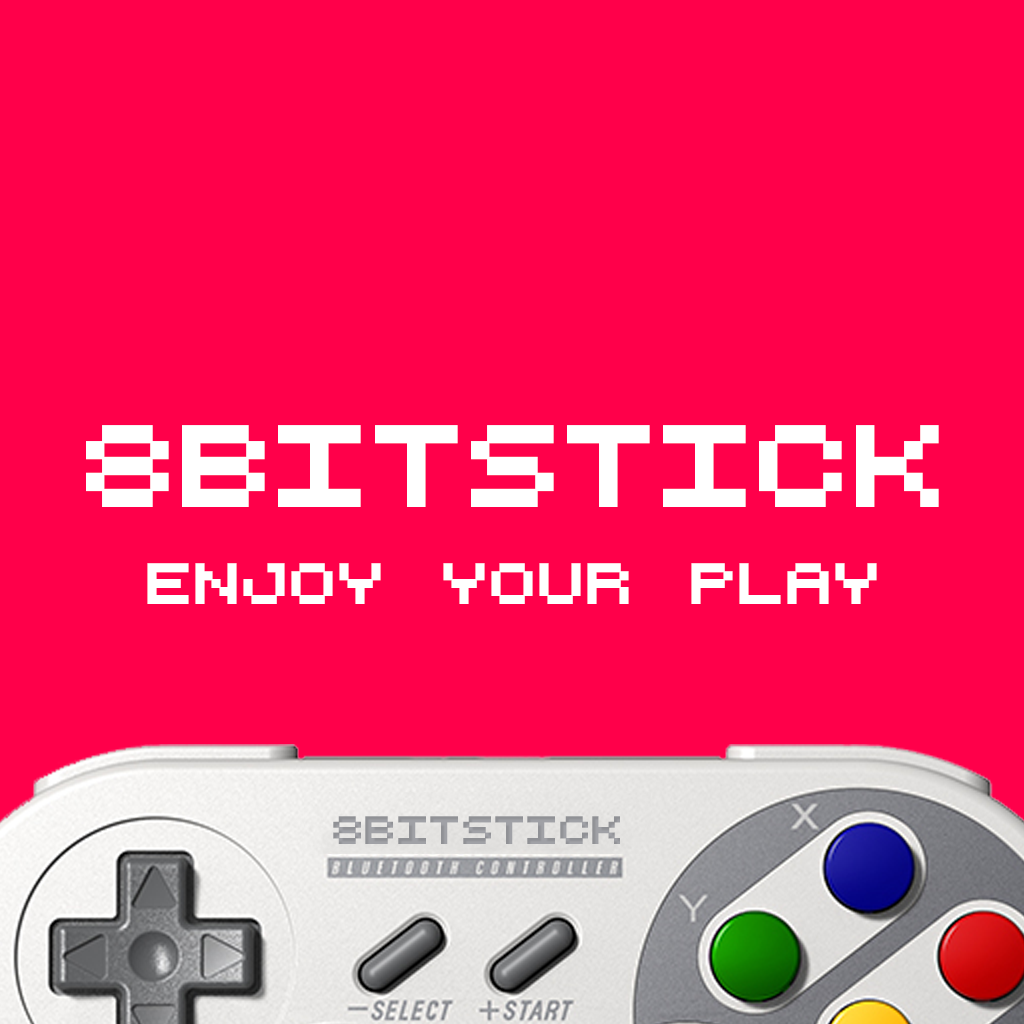
<style>
.page{position:relative;width:1024px;height:1024px;background:#ff004a}
.page>*{position:absolute;margin:0}
.t1{font:133.7px "LilliputSteps-Regular";color:#ffffff}
.t2{font:66.9px "LilliputSteps-Regular";color:#ffffff}
.t3{font:45.3px "LilliputSteps-Regular";color:#a0a1a6}
</style>
<div class="page">
<p class="t1" style="left:86px;top:425px;width:853px;height:82px">8BITSTICK</p>
<p class="t2" style="left:147px;top:563px;width:730px;height:41px">ENJOY YOUR PLAY</p>
<p class="t3" style="left:333px;top:816px;width:287px;height:28px">8BITSTICK</p>
</div>
